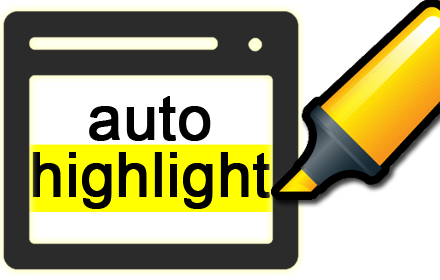
<style>
.page{position:relative;width:440px;height:280px;background:#ffffff}
.page>*{position:absolute;margin:0}
.t1{font:61px "ArialMT";color:#000000;font-weight:bold}
</style>
<div class="page">
<p class="t1" style="left:89px;top:96px;width:122px;height:45px">auto</p>
<p class="t1" style="left:32px;top:152px;width:238px;height:57px">highlight</p>
</div>
